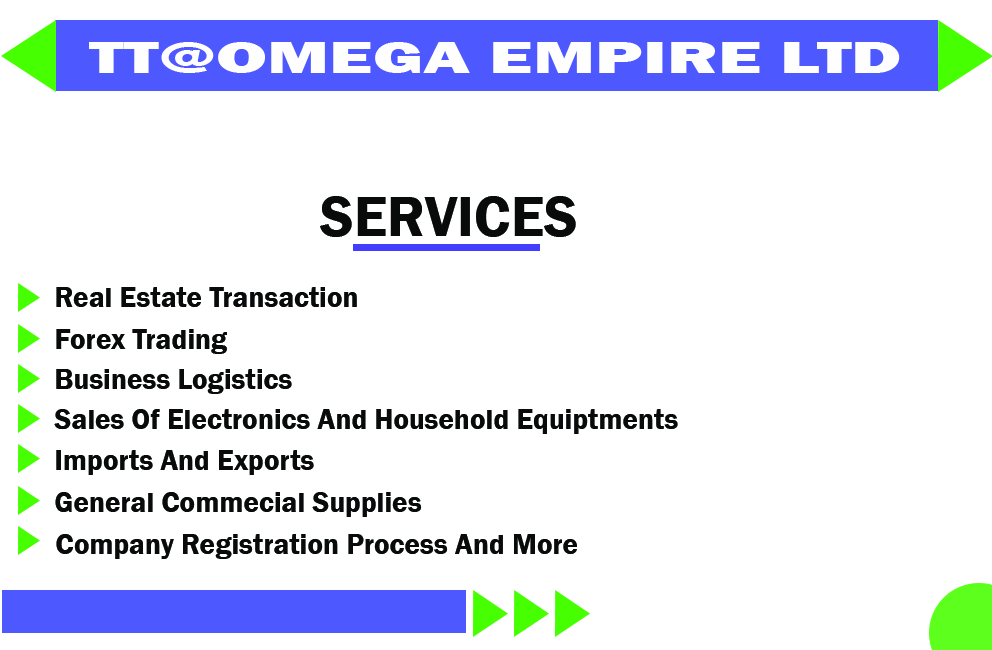
<style>
.page{position:relative;width:992px;height:650px;background:#ffffff}
.page>*{position:absolute;margin:0}
.t1{font:45.8px "FranklinGothic-Heavy";color:#fffeff;scale:1.62 1}
.t2{font:58.3px "FranklinGothic-Demi";color:#080b0b}
.t3{font:29.2px "FranklinGothic-Demi";color:#080b0b}
</style>
<div class="page">
<p class="t1" style="left:89px;top:42px;width:811px;height:31px">TT@OMEGA EMPIRE LTD</p>
<p class="t2" style="left:320px;top:196px;width:256px;height:41px">SERVICES</p>
<p class="t3" style="left:56px;top:287px;width:301px;height:20px">Real Estate Transaction</p>
<p class="t3" style="left:56px;top:329px;width:171px;height:25px">Forex Trading</p>
<p class="t3" style="left:56px;top:369px;width:236px;height:25px">Business Logistics</p>
<p class="t3" style="left:54px;top:409px;width:624px;height:25px">Sales Of Electronics And Household Equiptments</p>
<p class="t3" style="left:56px;top:450px;width:258px;height:25px">Imports And Exports</p>
<p class="t3" style="left:55px;top:492px;width:367px;height:25px">General Commecial Supplies</p>
<p class="t3" style="left:56px;top:534px;width:521px;height:25px">Company Registration Process And More</p>
</div>
